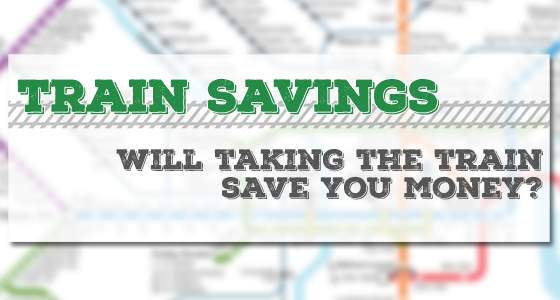
<style>
.page{position:relative;width:560px;height:300px}
.page>*{position:absolute;margin:0}
.t1{font:44.4px "NexaRustSlab-BlackShadow01";color:#258c47}
.t2{font:28px/28px "NexaRustSlab-BlackShadow01";color:#555555}
</style>
<div class="page">
<p class="t1" style="left:17px;top:78px;width:422px;height:37px">Train Savings</p>
<p class="t2" style="left:116px;top:149px;width:427px;height:51px;text-align:right">Will taking the train<br>save you money?</p>
</div>
